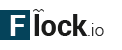
<style>
.page{position:relative;width:122px;height:50px;background:#ffffff}
.page>*{position:absolute;margin:0}
.t1{font:28.6px "Roboto-Bold";color:#ffffff}
.t2{font:28.6px "Roboto-Bold";color:#1b1b1a}
.t3{font:16.6px "Roboto-Light";color:#292929}
</style>
<div class="page">
<p class="t1" style="left:10px;top:15px;width:16px;height:21px">F</p>
<p class="t2" style="left:34px;top:14px;width:70px;height:22px">lock<span class="t3">.io</span></p>
</div>
